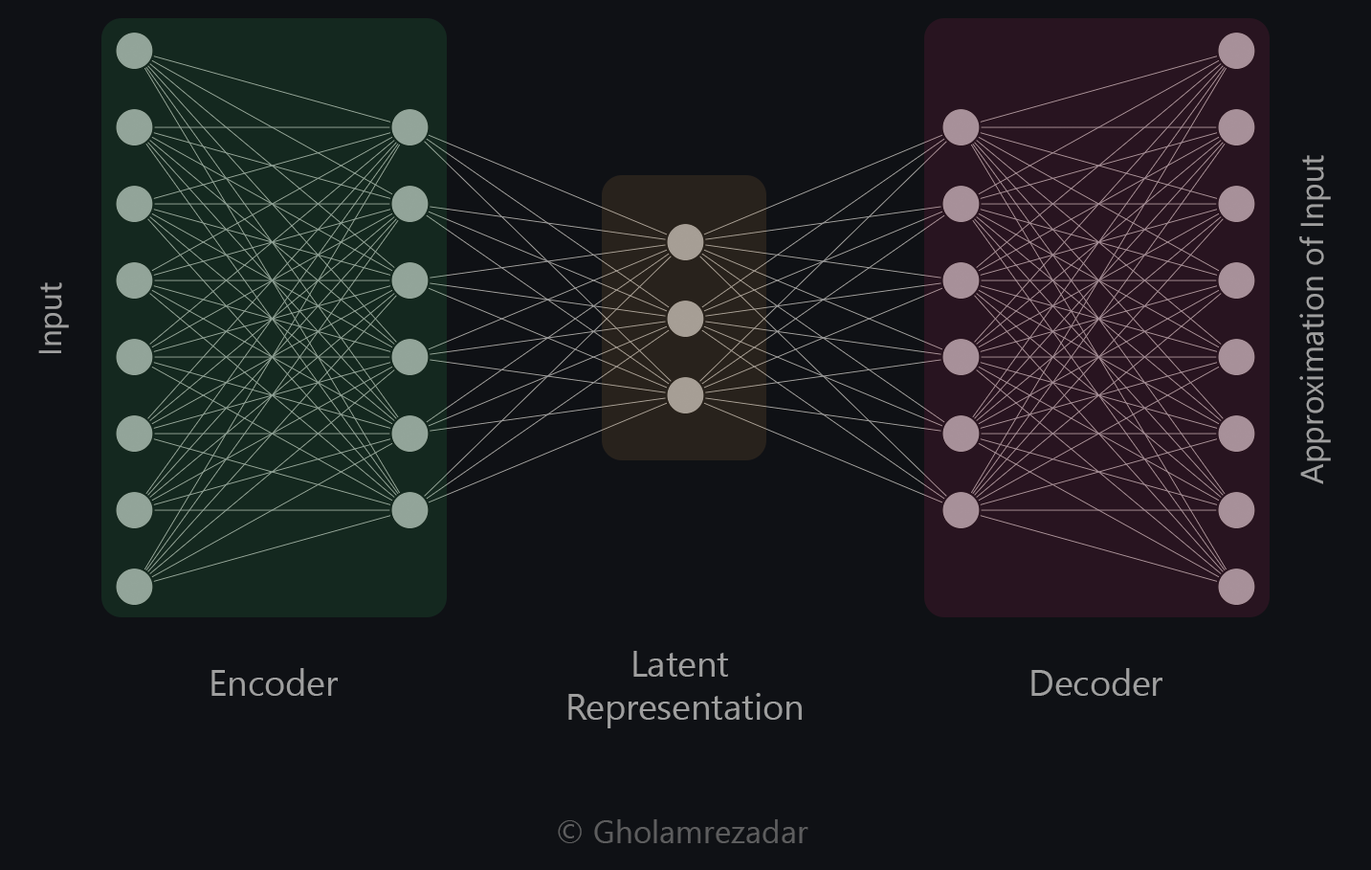
<style>
.page{position:relative;width:1371px;height:870px;background:#0f1115}
.page>*{position:absolute;margin:0}
.t1{font:31.9px "SegoeUI";color:#9f9f9f}
.t2{font:35.9px "SegoeUI";color:#9f9f9f}
.t3{font:31.9px "SegoeUI";color:#5d5d5e}
</style>
<div class="page">
<p class="t1" style="left:1299px;top:155px;width:32px;height:329px;rotate:-90deg">Approximation of Input</p>
<p class="t1" style="left:38px;top:282px;width:31px;height:71px;rotate:-90deg">Input</p>
<p class="t2" style="left:568px;top:651px;width:234px;height:77px;text-align:center">Latent <br>Representation</p>
<p class="t2" style="left:211px;top:668px;width:127px;height:28px">Encoder</p>
<p class="t2" style="left:1031px;top:668px;width:131px;height:28px">Decoder</p>
<p class="t3" style="left:558px;top:819px;width:250px;height:24px">© Gholamrezadar</p>
</div>
